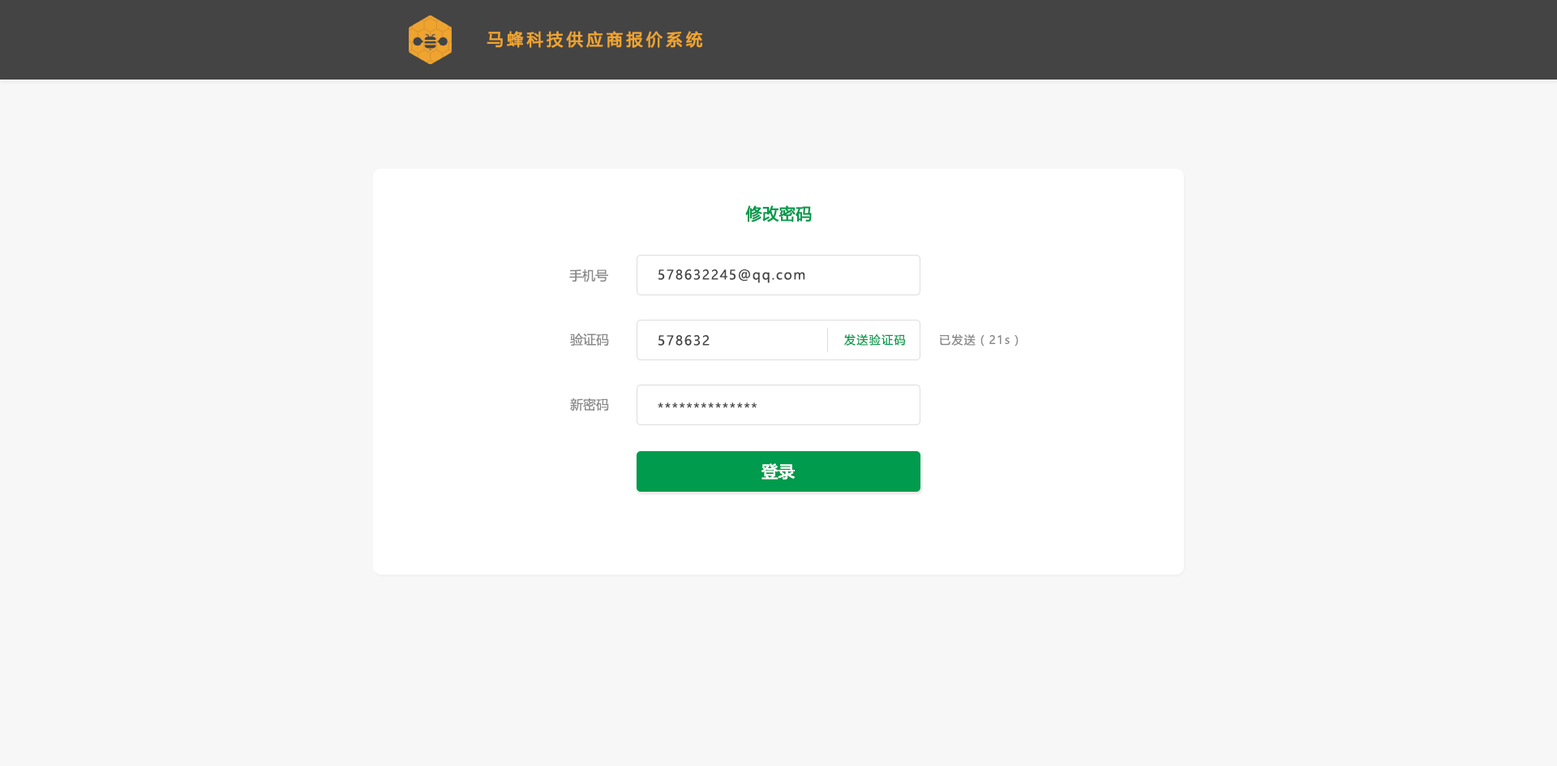
<style>
.page{position:relative;width:1557px;height:766px;background:#f7f7f7}
.page>*{position:absolute;margin:0}
.t1{font:16.2px "MicrosoftYaHei";letter-spacing:0.2em;color:#efa430;font-weight:bold}
.t2{font:16.2px "MicrosoftYaHei";color:#009b4c;font-weight:bold}
.t3{font:13px "MicrosoftYaHei";color:#888888}
.t4{font:13px "MicrosoftYaHei";letter-spacing:0.1em;color:#444444}
.t5{font:11.4px "MicrosoftYaHei";letter-spacing:0.1em;color:#009b4c}
.t6{font:11.4px "MicrosoftYaHei";letter-spacing:0.1em;color:#888888}
.t7{font:16.2px "MicrosoftYaHei";color:#ffffff;font-weight:bold}
</style>
<div class="page">
<p class="t1" style="left:487px;top:31px;width:216px;height:17px">马蜂科技供应商报价系统</p>
<p class="t2" style="left:745px;top:205px;width:67px;height:17px">修改密码</p>
<p class="t3" style="left:569px;top:268px;width:39px;height:14px">手机号</p>
<p class="t4" style="left:659px;top:269px;width:146px;height:14px">578632245@qq.com</p>
<p class="t3" style="left:570px;top:333px;width:39px;height:13px">验证码</p>
<p class="t4" style="left:659px;top:335px;width:51px;height:11px">578632</p>
<p class="t5" style="left:844px;top:334px;width:61px;height:12px">发送验证码</p>
<p class="t6" style="left:940px;top:334px;width:79px;height:12px">已发送（21s）</p>
<p class="t3" style="left:570px;top:397px;width:39px;height:14px">新密码</p>
<p class="t4" style="left:658px;top:402px;width:99px;height:6px">**************</p>
<p class="t7" style="left:762px;top:463px;width:33px;height:16px">登录</p>
</div>
